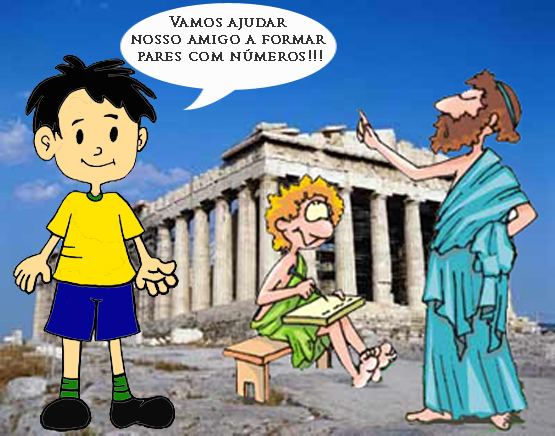
<style>
.page{position:relative;width:555px;height:436px}
.page>*{position:absolute;margin:0}
.t1{font:14px "TrajanPro-Regular";color:#333333;font-weight:bold}
</style>
<div class="page">
<p class="t1" style="left:131px;top:16px;width:195px;height:45px;text-align:center">Vamos ajudar <br>nosso amigo a formar <br>pares com números!!!</p>
</div>
